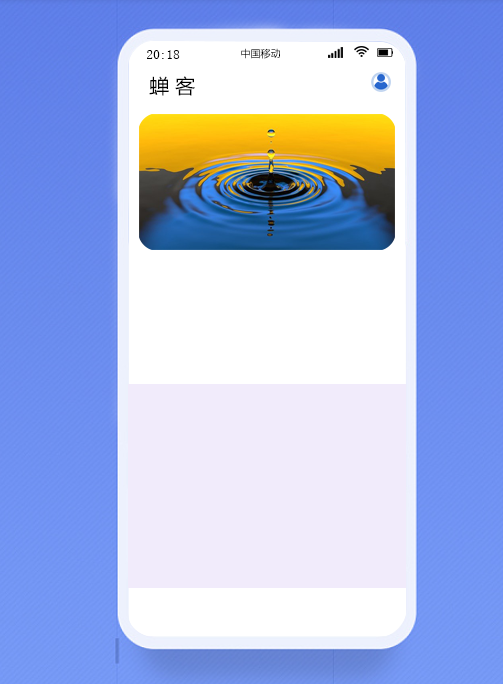
<style>
.page{position:relative;width:503px;height:684px;background:#ffffff}
.page>*{position:absolute;margin:0}
.t1{font:13.3px "SimSun";color:#000000}
.t2{font:10px "MicrosoftYaHei";color:#000000}
.t3{font:20px "MicrosoftYaHei";color:#000000}
</style>
<div class="page">
<p class="t1" style="left:147px;top:50px;width:33px;height:9px">20:18</p>
<p class="t2" style="left:241px;top:48px;width:39px;height:11px">中国移动</p>
<p class="t3" style="left:149px;top:76px;width:46px;height:20px">蝉 客</p>
</div>
